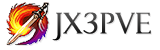
<style>
.page{position:relative;width:160px;height:50px;background:#ffffff}
.page>*{position:absolute;margin:0}
.t1{font:28px "FelixTitlingMT";font-weight:bold}
</style>
<div class="page">
<p class="t1" style="left:52px;top:12px;width:99px;height:29px">JX3PVE</p>
</div>
